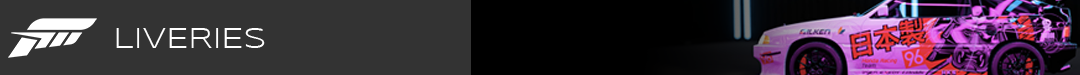
<style>
.page{position:relative;width:1080px;height:75px;background:#333333}
.page>*{position:absolute;margin:0}
.t1{font:29.4px "Syncopate-Regular";color:#ffffff}
</style>
<div class="page">
<p class="t1" style="left:116px;top:28px;width:149px;height:20px">LIVERIES</p>
</div>
